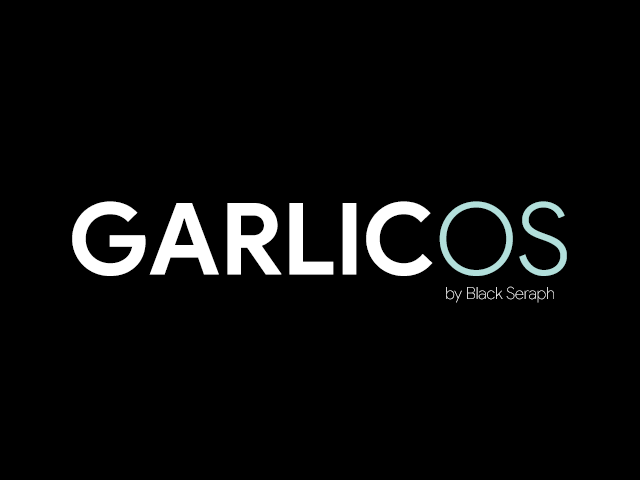
<style>
.page{position:relative;width:640px;height:480px;background:#000000}
.page>*{position:absolute;margin:0}
.t1{font:100px "ProductSans-Bold";color:#ffffff}
.t2{font:100px "ProductSans-Light";color:#b2dfdb}
</style>
<div class="page">
<p class="t1" style="left:72px;top:201px;width:495px;height:75px">GARLIC<span class="t2">OS</span></p>
</div>
